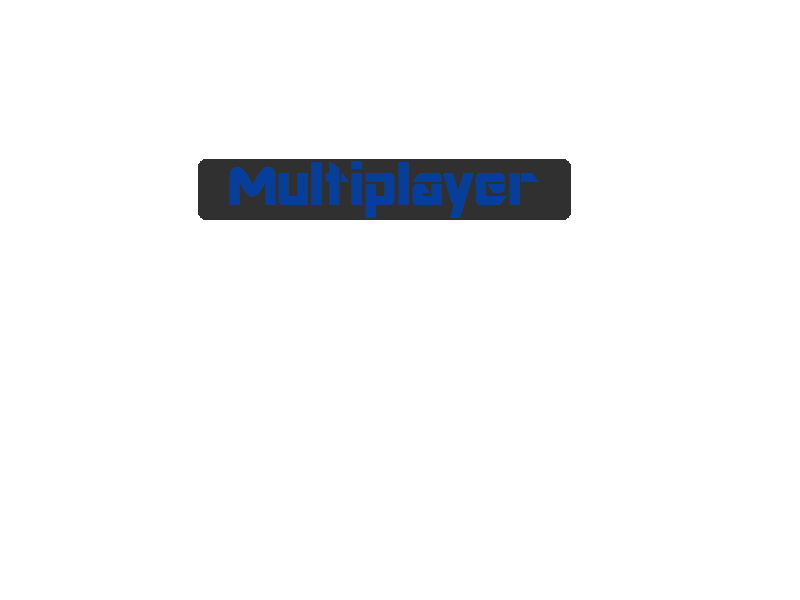
<style>
.page{position:relative;width:800px;height:600px;background:#ffffff}
.page>*{position:absolute;margin:0}
.t1{font:60px "ARDESTINE";color:#063e9b}
</style>
<div class="page">
<p class="t1" style="left:229px;top:161px;width:310px;height:57px">Multiplayer</p>
</div>
